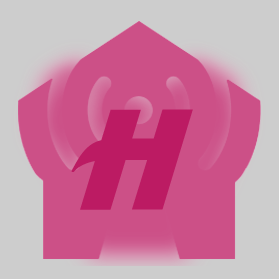
<style>
.page{position:relative;width:279px;height:279px;background:#cdcdcd}
.page>*{position:absolute;margin:0}
.t1{font:133.9px "Masque";letter-spacing:0.04em;color:#bc1b63}
</style>
<div class="page">
<p class="t1" style="left:71px;top:109px;width:122px;height:101px">H</p>
</div>
